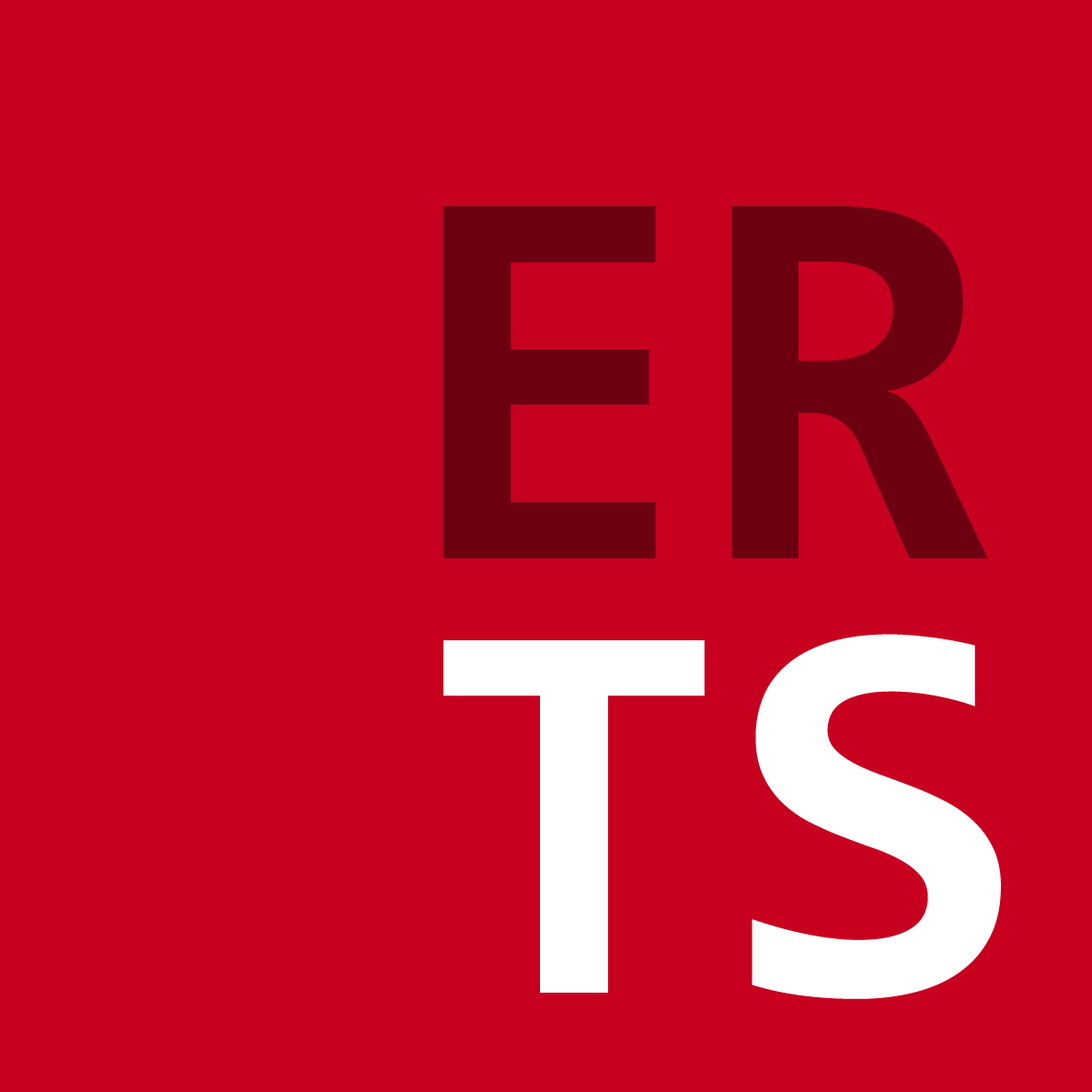
<style>
.page{position:relative;width:1092px;height:1092px;background:#c70020}
.page>*{position:absolute;margin:0}
.t1{font:552px "Consolas-Bold";color:#6c0011}
.t2{font:552px "Consolas-Bold";color:#ffffff}
</style>
<div class="page">
<p class="t1" style="left:442px;top:206px;width:546px;height:352px">ER</p>
<p class="t2" style="left:443px;top:634px;width:558px;height:365px">TS</p>
</div>
